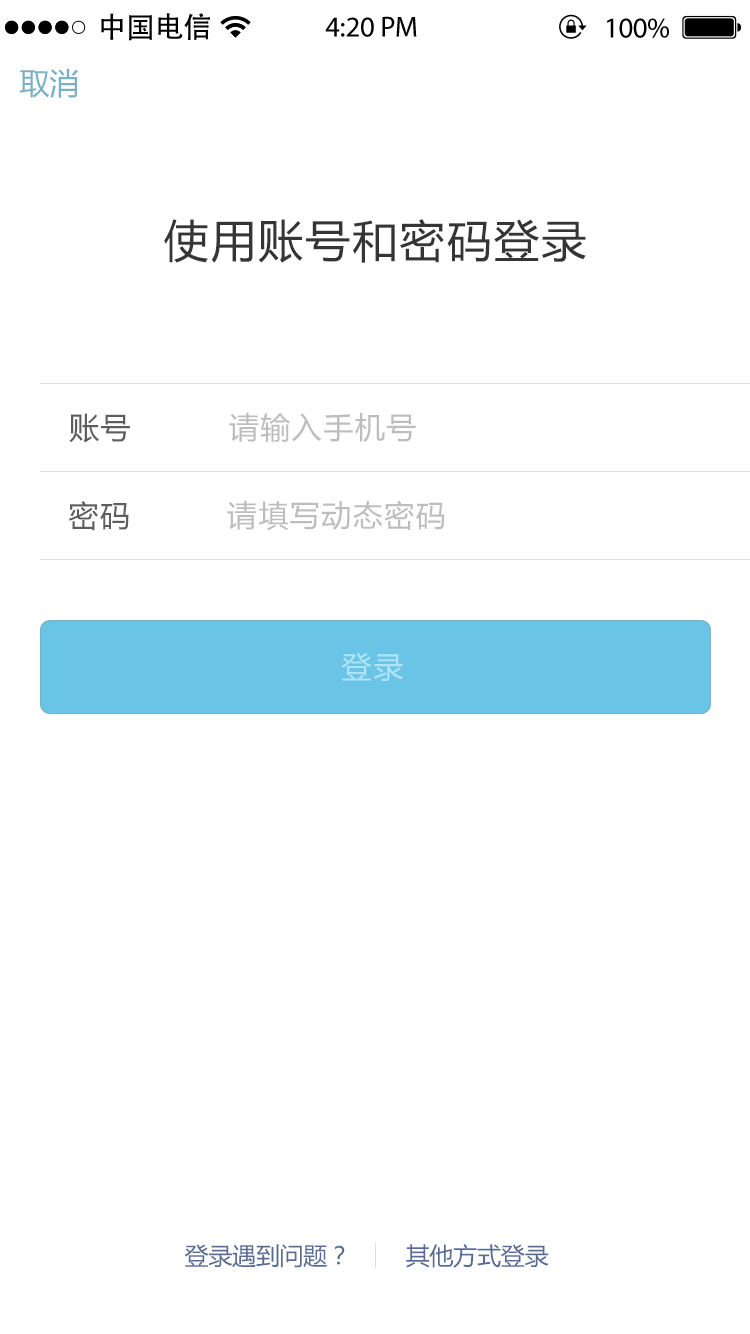
<style>
.page{position:relative;width:750px;height:1334px;background:#ffffff}
.page>*{position:absolute;margin:0}
.t1{font:28.8px "AdobeHeitiStd-Regular";color:#000000}
.t2{font:28.8px "MyriadPro-Regular";color:#000000}
.t3{font:30px "MicrosoftYaHei";color:#78b0c5}
.t4{font:45px "MicrosoftYaHei";letter-spacing:0.05em;color:#353535}
.t5{font:30px "MicrosoftYaHei";letter-spacing:0.05em;color:#5d5d5d}
.t6{font:30px "MicrosoftYaHei";letter-spacing:0.05em;color:#bdbdbd}
.t7{font:30px "MicrosoftYaHei";letter-spacing:0.05em;color:#afe3f7}
.t8{font:24px "MicrosoftYaHei";letter-spacing:-0.01em;color:#576b95}
</style>
<div class="page">
<p class="t1" style="left:101px;top:13px;width:109px;height:28px">中国电信</p>
<p class="t2" style="left:325px;top:16px;width:92px;height:21px">4:20 PM</p>
<p class="t2" style="left:607px;top:18px;width:62px;height:20px">100%</p>
<p class="t3" style="left:19px;top:68px;width:59px;height:30px">取消</p>
<p class="t4" style="left:164px;top:219px;width:422px;height:44px">使用账号和密码登录</p>
<p class="t5" style="left:69px;top:413px;width:61px;height:30px">账号</p>
<p class="t6" style="left:229px;top:412px;width:187px;height:30px">请输入手机号</p>
<p class="t5" style="left:68px;top:501px;width:61px;height:30px">密码</p>
<p class="t6" style="left:227px;top:500px;width:218px;height:31px">请填写动态密码</p>
<p class="t7" style="left:341px;top:652px;width:62px;height:29px">登录</p>
<p class="t8" style="left:184px;top:1244px;width:365px;height:24px">登录遇到问题？        其他方式登录</p>
</div>
